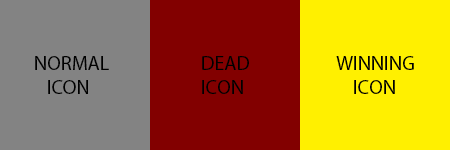
<style>
.page{position:relative;width:450px;height:150px;background:#820000}
.page>*{position:absolute;margin:0}
.t1{font:20px "MyriadPro-Regular";color:#000000}
</style>
<div class="page">
<p class="t1" style="left:35px;top:56px;width:74px;height:38px">NORMAL<br>   ICON</p>
<p class="t1" style="left:202px;top:56px;width:47px;height:38px">DEAD<br>ICON</p>
<p class="t1" style="left:336px;top:56px;width:78px;height:38px">WINNING<br>    ICON</p>
</div>
